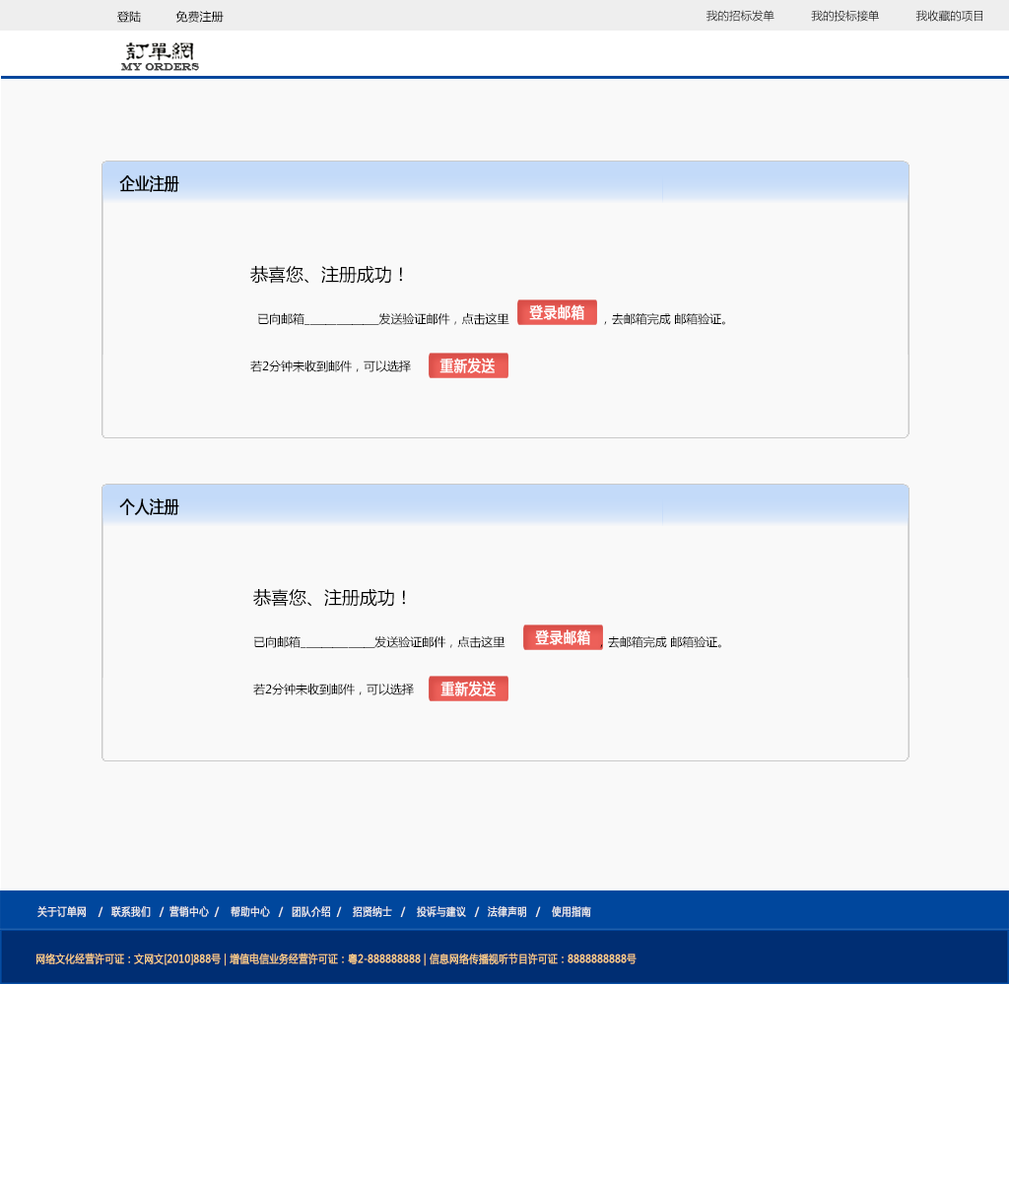
<style>
.page{position:relative;width:1009px;height:1182px;background:#f9f9f9}
.page>*{position:absolute;margin:0}
.t1{font:11.8px "MicrosoftYaHei";color:#000000}
.t2{font:11.3px "MicrosoftYaHei";color:#000000}
.t3{font:10.8px "EngraversMT";color:#434343;font-variant:small-caps;font-weight:bold;scale:0.86 1}
.t4{font:17.2px "MicrosoftYaHei";color:#000000;font-variant:small-caps;font-weight:bold;scale:0.86 1}
.t5{font:11.8px/47.3px "MicrosoftYaHei";color:#000000}
.t6{font:17.7px/47.3px "MicrosoftYaHei";color:#000000}
.t7{font:15.2px "MicrosoftYaHei";color:#ffffff;font-variant:small-caps;font-weight:bold;scale:0.86 1}
.t8{font:10.8px "MicrosoftYaHei";color:#eeeeee;font-variant:small-caps;font-weight:bold;scale:0.86 1}
.t9{font:15.2px "STXihei";color:#eeeeee;font-variant:small-caps;font-weight:bold;scale:0.86 1}
.t10{font:10.8px "MicrosoftYaHei";color:#facd89;font-variant:small-caps;font-weight:bold;scale:0.87 1}
.t11{font:10.8px "MicrosoftYaHei";color:#eeeeee;font-variant:small-caps;font-weight:bold;scale:0.87 1}
</style>
<div class="page">
<p class="t1" style="left:117px;top:11px;width:107px;height:12px">登陆          免费注册</p>
<p class="t2" style="left:706px;top:10px;width:276px;height:12px">我的招标发单           我的投标接单           我收藏的项目</p>
<p class="t3" style="left:121px;top:63px;width:78px;height:8px">MY ORDERS</p>
<p class="t4" style="left:119px;top:175px;width:60px;height:17px">企业注册</p>
<p class="t5" style="left:250px;top:266px;width:475px;height:106px"><span class="t6">恭喜您、注册成功！<br></span>  已向邮箱______________发送验证邮件，点击这里                          ，去邮箱完成 邮箱验证。<br>若2分钟未收到邮件，可以选择</p>
<p class="t7" style="left:529px;top:304px;width:55px;height:16px">登录邮箱</p>
<p class="t7" style="left:439px;top:358px;width:56px;height:15px">重新发送</p>
<p class="t4" style="left:119px;top:498px;width:60px;height:17px">个人注册</p>
<p class="t5" style="left:253px;top:589px;width:468px;height:106px"><span class="t6">恭喜您、注册成功！<br></span>已向邮箱______________发送验证邮件，点击这里                          ，去邮箱完成 邮箱验证。<br>若2分钟未收到邮件，可以选择</p>
<p class="t7" style="left:535px;top:629px;width:55px;height:16px">登录邮箱</p>
<p class="t7" style="left:440px;top:681px;width:56px;height:15px">重新发送</p>
<p class="t8" style="left:37px;top:905px;width:554px;height:12px"><span class="t9"><br><br></span>关于订单网    /   联系我们   /  营销中心  /    帮助中心   /   团队介绍  /    招贤纳士   /    投诉与建议   /   法律声明   /    使用指南</p>
<p class="t10" style="left:36px;top:953px;width:600px;height:13px"><span class="t11"> </span>网络文化经营许可证：文网文[2010]888号 | 增值电信业务经营许可证：粤2-888888888 | 信息网络传播视听节目许可证：8888888888号</p>
</div>
